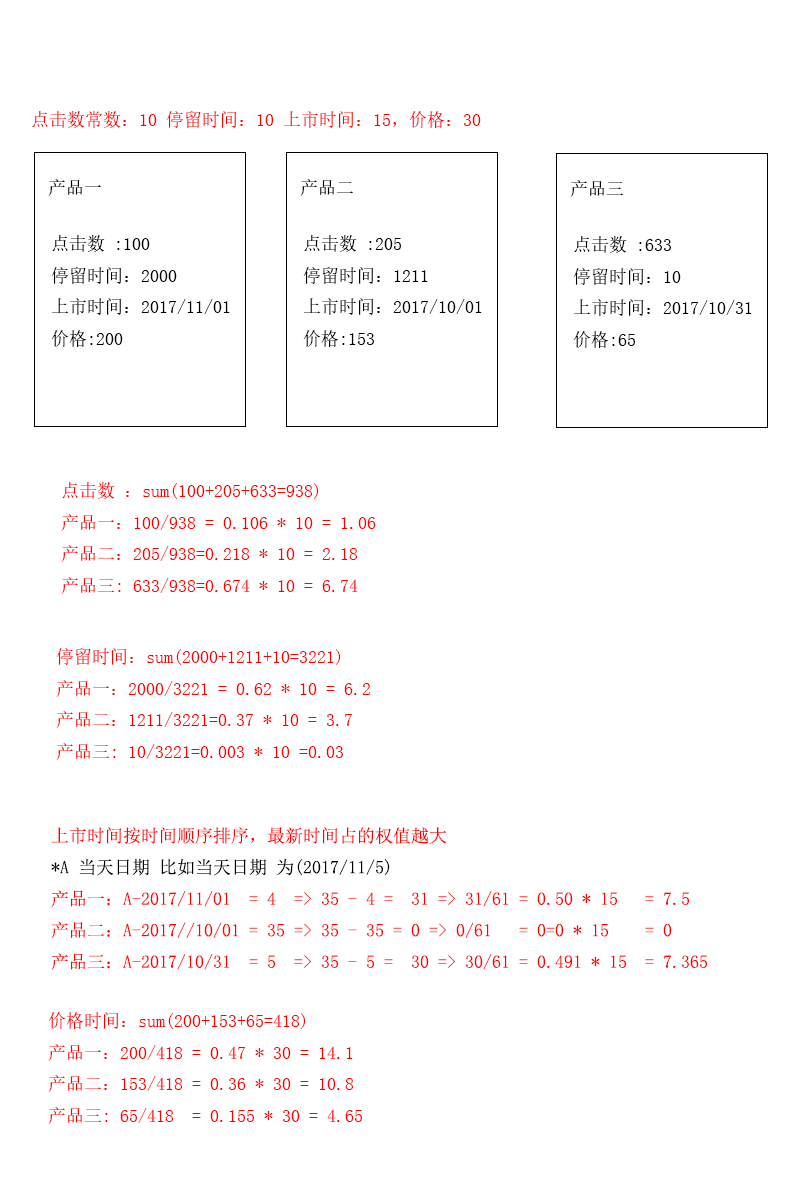
<style>
.page{position:relative;width:800px;height:1200px;background:#ffffff}
.page>*{position:absolute;margin:0}
.t1{font:18px "SimSun";color:#ff0000}
.t2{font:18px "SimSun";color:#000000}
</style>
<div class="page">
<p class="t1" style="left:32px;top:111px;width:449px;height:17px">点击数常数：10 停留时间：10 上市时间：15，价格：30</p>
<p class="t2" style="left:48px;top:179px;width:53px;height:17px">产品一</p>
<p class="t2" style="left:300px;top:179px;width:53px;height:17px">产品二</p>
<p class="t2" style="left:570px;top:180px;width:54px;height:17px">产品三</p>
<p class="t2" style="left:51px;top:235px;width:179px;height:112px">点击数 :100<br>停留时间：2000<br>上市时间：2017/11/01<br>价格:200</p>
<p class="t2" style="left:303px;top:235px;width:179px;height:112px">点击数 :205<br>停留时间：1211<br>上市时间：2017/10/01<br>价格:153</p>
<p class="t2" style="left:573px;top:236px;width:179px;height:112px">点击数 :633<br>停留时间：10<br>上市时间：2017/10/31<br>价格:65</p>
<p class="t1" style="left:61px;top:482px;width:315px;height:112px">点击数 ：sum(100+205+633=938)<br>产品一：100/938 = 0.106 * 10 = 1.06<br>产品二：205/938=0.218 * 10 = 2.18<br>产品三: 633/938=0.674 * 10 = 6.74</p>
<p class="t1" style="left:56px;top:648px;width:314px;height:112px">停留时间：sum(2000+1211+10=3221)<br>产品一：2000/3221 = 0.62 * 10 = 6.2<br>产品二：1211/3221=0.37 * 10 = 3.7<br>产品三: 10/3221=0.003 * 10 =0.03</p>
<p class="t1" style="left:51px;top:827px;width:656px;height:143px">上市时间按时间顺序排序，最新时间占的权值越大<br><span class="t2">*A 当天日期 比如当天日期 为(2017/11/5) </span><br>产品一：A-2017/11/01  = 4  =&gt; 35 - 4 =  31 =&gt; 31/61 = 0.50 * 15   = 7.5<br>产品二：A-2017//10/01 = 35 =&gt; 35 - 35 = 0 =&gt; 0/61   = 0=0 * 15    = 0<br>产品三：A-2017/10/31  = 5  =&gt; 35 - 5 =  30 =&gt; 30/61 = 0.491 * 15  = 7.365</p>
<p class="t1" style="left:48px;top:1012px;width:314px;height:112px">价格时间：sum(200+153+65=418)<br>产品一：200/418 = 0.47 * 30 = 14.1<br>产品二：153/418 = 0.36 * 30 = 10.8<br>产品三: 65/418  = 0.155 * 30 = 4.65</p>
</div>
